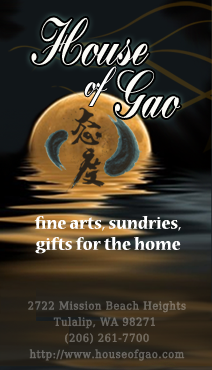
<style>
.page{position:relative;width:212px;height:370px}
.page>*{position:absolute;margin:0}
.t1{font:65.9px "Bolina";color:#fafaf5}
.t2{font:42px "Bolina";color:#ffffff}
.t3{font:18.6px/21px "NuevaStd-BoldCond";color:#ffffff;scale:1.25 1}
.t4{font:11px/16.1px "DejaVuSerifCondensed";letter-spacing:0.025em;color:#6a675f;font-weight:bold}
</style>
<div class="page">
<p class="t1" style="left:31px;top:17px;width:118px;height:49px">House</p>
<p class="t2" style="left:84px;top:66px;width:33px;height:40px">of</p>
<p class="t1" style="left:115px;top:70px;width:66px;height:48px">Gao</p>
<p class="t3" style="left:34px;top:216px;width:147px;height:38px;text-align:center">fine arts, sundries,<br>gifts for the home</p>
<p class="t4" style="left:28px;top:301px;width:158px;height:60px;text-align:center">2722 Mission Beach Heights<br>Tulalip, WA 98271 <br> (206) 261-7700 <br>http://www.houseofgao.com</p>
</div>
